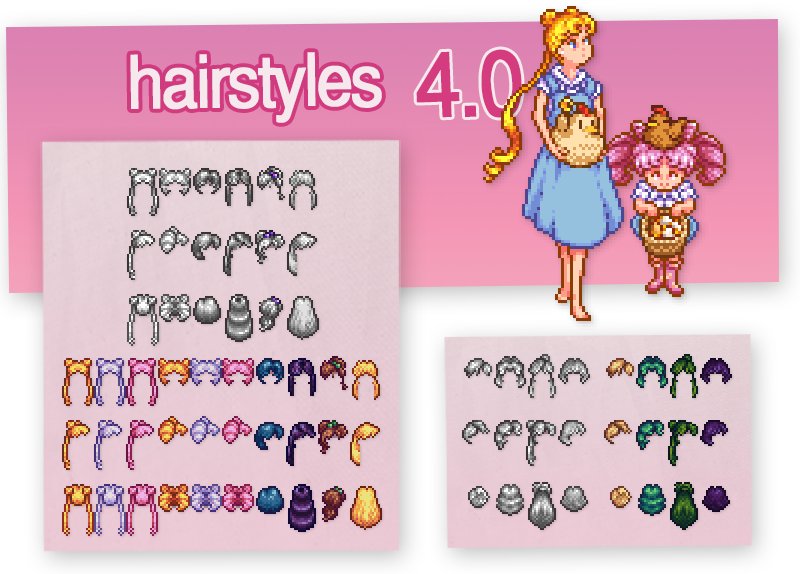
<style>
.page{position:relative;width:800px;height:574px}
.page>*{position:absolute;margin:0}
.t1{font:72px "Helvetica-Normal";letter-spacing:-0.06em;color:#f5e9ee;font-weight:bold;scale:0.9 1}
.t2{font:90px "Helvetica-Normal";letter-spacing:-0.05em;color:#d43c7f;font-weight:bold;scale:0.9 1}
</style>
<div class="page">
<p class="t1" style="left:130px;top:52px;width:252px;height:71px;rotate:-1deg">hairstyles</p>
<p class="t2" style="left:416px;top:49px;width:106px;height:69px;rotate:-2deg">4.0</p>
</div>
